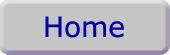
<style>
.page{position:relative;width:170px;height:55px;background:#c5c5c5}
.page>*{position:absolute;margin:0}
.t1{font:28px "Verdana";color:#0400a2}
</style>
<div class="page">
<p class="t1" style="left:45px;top:16px;width:79px;height:22px">Home</p>
</div>
